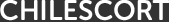
<style>
.page{position:relative;width:169px;height:22px;background:#333333}
.page>*{position:absolute;margin:0}
.t1{font:28px "MuseoSansRounded-700";color:#ffffff}
</style>
<div class="page">
<p class="t1" style="left:0px;top:0px;width:170px;height:21px">CHILESCORT</p>
</div>
